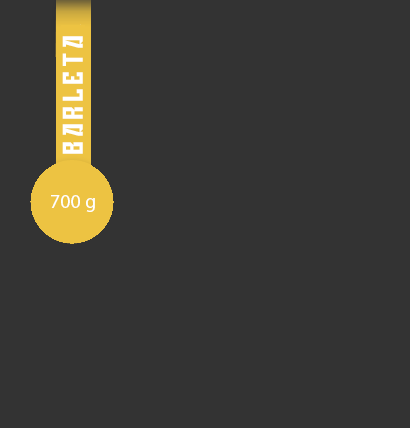
<style>
.page{position:relative;width:410px;height:428px;background:#333333}
.page>*{position:absolute;margin:0}
.t1{font:33.2px "Gagarin";letter-spacing:0.14em;color:#ffffff}
.t2{font:20px "MyriadPro-Regular";color:#ffffff}
</style>
<div class="page">
<p class="t1" style="left:62px;top:36px;width:21px;height:118px;rotate:-90deg">Barleta</p>
<p class="t2" style="left:51px;top:195px;width:44px;height:17px">700 g</p>
</div>
